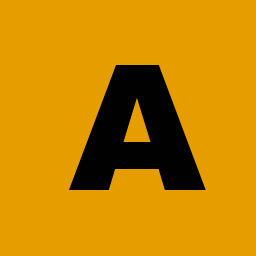
<style>
.page{position:relative;width:256px;height:256px;background:#e69d00}
.page>*{position:absolute;margin:0}
.t1{font:174.7px "Arial-Black";color:#010101}
</style>
<div class="page">
<p class="t1" style="left:69px;top:65px;width:137px;height:125px">A</p>
</div>
